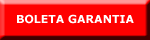
<style>
.page{position:relative;width:150px;height:40px;background:#ff0000}
.page>*{position:absolute;margin:0}
.t1{font:11px "Verdana-Bold";color:#ffffff}
</style>
<div class="page">
<p class="t1" style="left:17px;top:14px;width:117px;height:10px">BOLETA GARANTIA</p>
</div>
